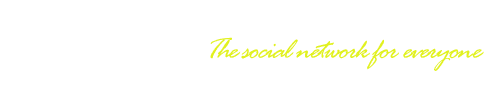
<style>
.page{position:relative;width:500px;height:96px;background:#ffffff}
.page>*{position:absolute;margin:0}
.t1{font:30px "RageItalic";letter-spacing:-0.065em;color:#e1f11f;font-style:italic}
</style>
<div class="page">
<p class="t1" style="left:210px;top:37px;width:274px;height:34px">The social network for everyone</p>
</div>
